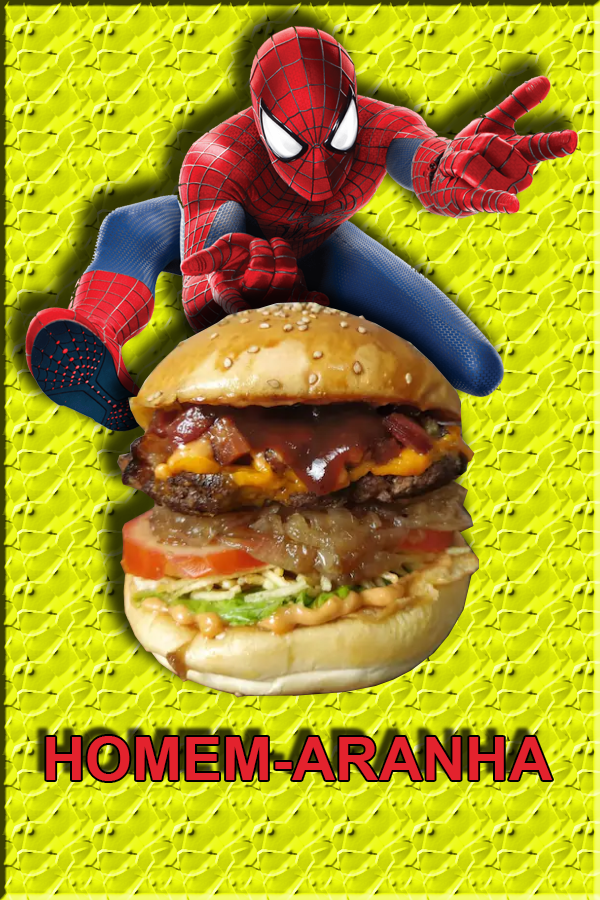
<style>
.page{position:relative;width:600px;height:900px}
.page>*{position:absolute;margin:0}
.t1{font:60px "Arial-BoldMT";color:#e3222d}
</style>
<div class="page">
<p class="t1" style="left:46px;top:736px;width:506px;height:45px">HOMEM-ARANHA</p>
</div>
